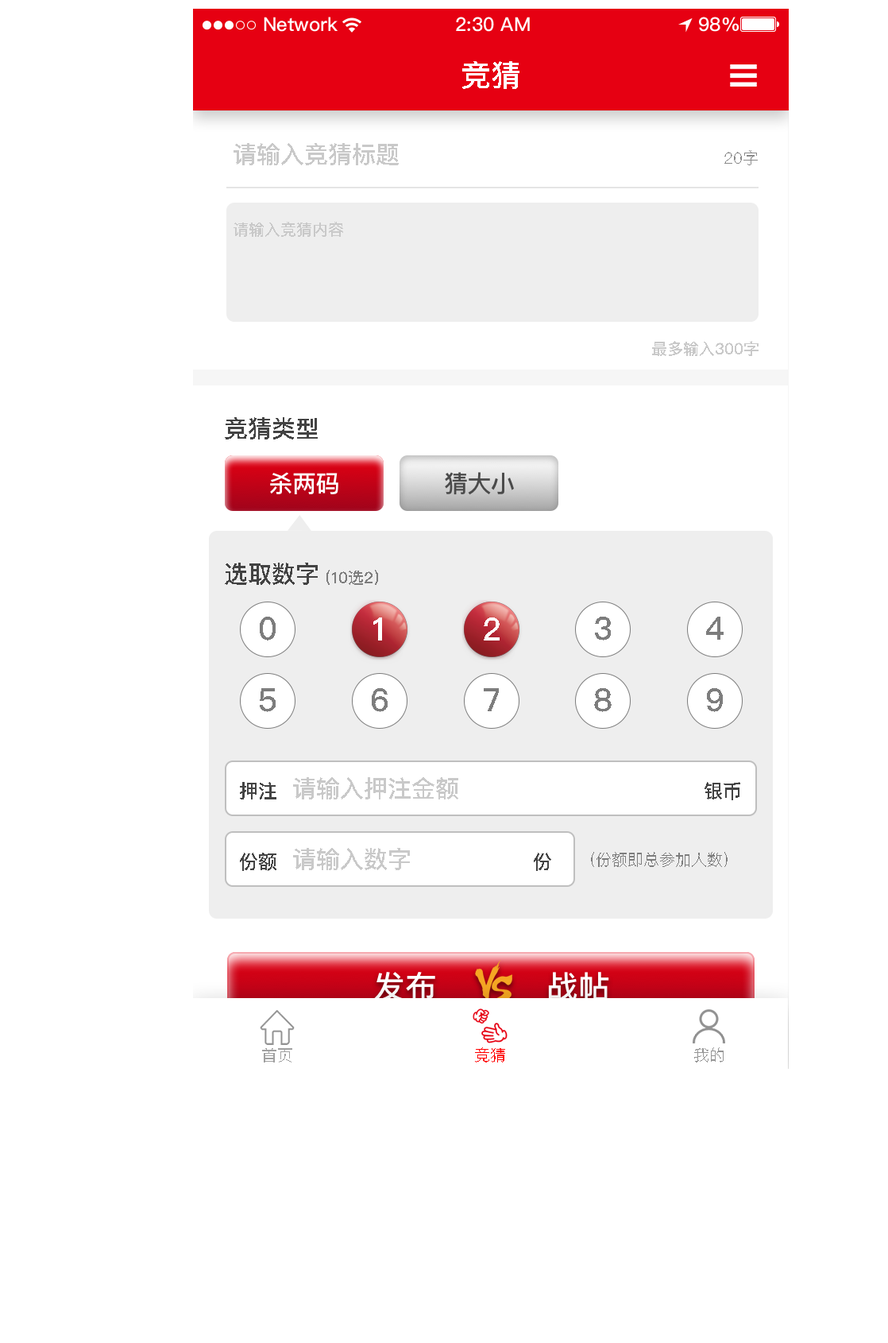
<style>
.page{position:relative;width:888px;height:1343px;background:#ffffff}
.page>*{position:absolute;margin:0}
.t1{font:30.2px "PingFangSC-Medium";color:#ffffff;text-transform:uppercase}
.t2{font:23.8px "PingFangSC-Medium";color:#c9c9c9;text-transform:uppercase}
.t3{font:15.9px "PingFangSC-Regular";color:#898989;text-transform:uppercase}
.t4{font:15.9px "PingFangSC-Medium";color:#c9c9c9;text-transform:uppercase}
.t5{font:23.8px "PingFangSC-Medium";color:#434343;text-transform:uppercase}
.t6{font:15.9px "PingFangSC-Medium";color:#7d7d7d;text-transform:uppercase}
.t7{font:31.8px "PingFangSC-Medium";color:#7d7d7d;text-transform:uppercase}
.t8{font:31.8px "PingFangSC-Medium";color:#ffffff;text-transform:uppercase}
.t9{font:19.1px "PingFangSC-Medium";color:#434343;text-transform:uppercase}
.t10{font:15.9px "PingFangSC-Regular";color:#7d7d7d;text-transform:uppercase}
.t11{font:15.9px "PingFangSC-Regular";color:#a0a0a0;text-transform:uppercase}
.t12{font:15.9px "PingFangSC-Regular";color:#ff0000;text-transform:uppercase}
.t13{font:15.9px "PingFangSC-Regular";color:#959595;text-transform:uppercase}
</style>
<div class="page">
<p class="t1" style="left:462px;top:61px;width:58px;height:28px">竞猜</p>
<p class="t2" style="left:234px;top:143px;width:165px;height:22px">请输入竞猜标题</p>
<p class="t3" style="left:725px;top:150px;width:33px;height:15px">20字</p>
<p class="t4" style="left:234px;top:222px;width:109px;height:15px">请输入竞猜内容</p>
<p class="t4" style="left:652px;top:341px;width:107px;height:15px">最多输入300字</p>
<p class="t5" style="left:225px;top:417px;width:93px;height:22px">竞猜类型</p>
<p class="t5" style="left:225px;top:562px;width:93px;height:23px">选取数字</p>
<p class="t6" style="left:327px;top:570px;width:51px;height:15px">（10选2）</p>
<p class="t7" style="left:260px;top:616px;width:16px;height:24px">0</p>
<p class="t8" style="left:373px;top:617px;width:9px;height:23px">1</p>
<p class="t8" style="left:484px;top:617px;width:16px;height:23px">2</p>
<p class="t7" style="left:595px;top:616px;width:16px;height:24px">3</p>
<p class="t7" style="left:706px;top:616px;width:18px;height:24px">4</p>
<p class="t7" style="left:260px;top:688px;width:16px;height:24px">5</p>
<p class="t7" style="left:372px;top:688px;width:16px;height:24px">6</p>
<p class="t7" style="left:484px;top:688px;width:15px;height:23px">7</p>
<p class="t7" style="left:594px;top:688px;width:18px;height:24px">8</p>
<p class="t7" style="left:707px;top:688px;width:16px;height:24px">9</p>
<p class="t9" style="left:240px;top:782px;width:36px;height:17px">押注</p>
<p class="t2" style="left:293px;top:777px;width:165px;height:22px">请输入押注金额</p>
<p class="t9" style="left:705px;top:782px;width:35px;height:18px">银币</p>
<p class="t9" style="left:240px;top:852px;width:36px;height:19px">份额</p>
<p class="t2" style="left:293px;top:848px;width:117px;height:22px">请输入数字</p>
<p class="t9" style="left:534px;top:852px;width:17px;height:19px">份</p>
<p class="t10" style="left:591px;top:852px;width:137px;height:15px">（份额即总参加人数）</p>
<p class="t11" style="left:262px;top:1048px;width:30px;height:14px">首页</p>
<p class="t12" style="left:475px;top:1047px;width:30px;height:15px">竞猜</p>
<p class="t13" style="left:694px;top:1047px;width:30px;height:15px">我的</p>
</div>
